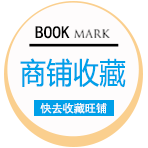
<style>
.page{position:relative;width:148px;height:148px;background:#fefcfc}
.page>*{position:absolute;margin:0}
.t1{font:17.3px "SimHei";color:#030303;text-transform:uppercase}
.t2{font:11.1px "TrajanPro-Regular";color:#030303;text-transform:uppercase}
.t3{font:29.3px "MicrosoftYaHei";letter-spacing:0.02em;color:#00a0e9;text-transform:uppercase;scale:0.89 1}
.t4{font:11.1px "SimHei";color:#fafcfb;text-transform:uppercase}
</style>
<div class="page">
<p class="t1" style="left:35px;top:26px;width:35px;height:13px">BOOK</p>
<p class="t2" style="left:74px;top:29px;width:36px;height:9px">Mark</p>
<p class="t3" style="left:20px;top:58px;width:106px;height:30px">商铺收藏</p>
<p class="t4" style="left:40px;top:103px;width:67px;height:11px">快去收藏旺铺</p>
</div>
